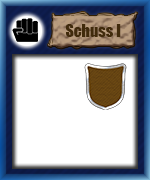
<style>
.page{position:relative;width:150px;height:180px;background:#ffffff}
.page>*{position:absolute;margin:0}
.t1{font:16px "Impact";color:#412b0c}
</style>
<div class="page">
<p class="t1" style="left:65px;top:24px;width:56px;height:13px">Schuss I</p>
</div>
